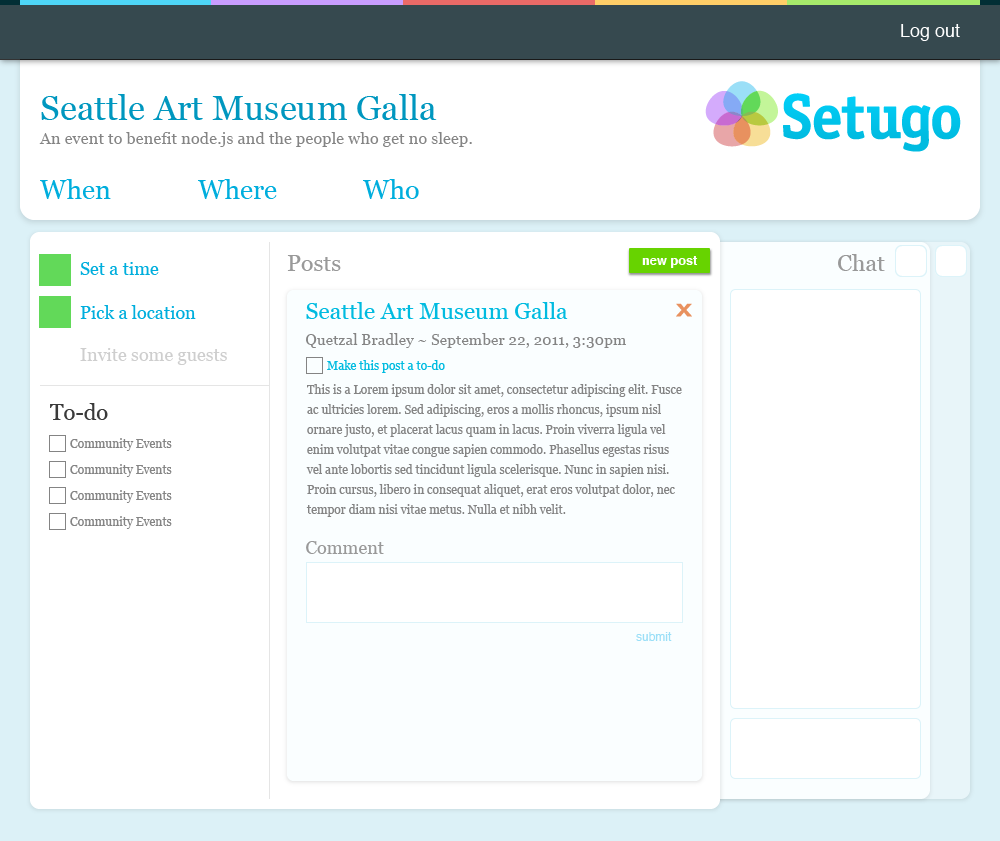
<style>
.page{position:relative;width:1000px;height:841px;background:#ffffff}
.page>*{position:absolute;margin:0}
.t1{font:18px "Helvetica";color:#ffffff}
.t2{font:35px "Georgia";color:#0097bf}
.t3{font:16.4px "Georgia";color:#848484}
.t4{font:27px "Georgia";color:#00aedd}
.t5{font:23px "Georgia";color:#999999}
.t6{font:12.8px "Helvetica-Bold";color:#ffffff}
.t7{font:18px "Georgia";color:#00aedd}
.t8{font:23.1px "Georgia";color:#00bbe0}
.t9{font:15.4px "Georgia";color:#848484}
.t10{font:18px "Georgia";color:#cecece}
.t11{font:12px "Georgia";color:#00bbe0}
.t12{font:12px/20px "Georgia";color:#848484}
.t13{font:22px "Georgia";color:#3a3a3a}
.t14{font:12px "Georgia";color:#848484}
.t15{font:18px "Georgia";color:#999999}
.t16{font:12px "Helvetica";color:#9bdff7}
</style>
<div class="page">
<p class="t1" style="left:901px;top:24px;width:59px;height:17px">Log out</p>
<p class="t2" style="left:41px;top:94px;width:396px;height:26px">Seattle Art Museum Galla</p>
<p class="t3" style="left:39px;top:132px;width:433px;height:15px">An event to benefit node.js and the people who get no sleep.</p>
<p class="t4" style="left:40px;top:179px;width:71px;height:20px">When</p>
<p class="t4" style="left:198px;top:179px;width:79px;height:20px">Where</p>
<p class="t4" style="left:363px;top:179px;width:56px;height:20px">Who</p>
<p class="t5" style="left:287px;top:255px;width:54px;height:16px">Posts</p>
<p class="t6" style="left:642px;top:256px;width:56px;height:12px">new post</p>
<p class="t5" style="left:838px;top:254px;width:47px;height:17px">Chat</p>
<p class="t7" style="left:80px;top:262px;width:79px;height:13px">Set a time</p>
<p class="t7" style="left:80px;top:305px;width:116px;height:14px">Pick a location</p>
<p class="t8" style="left:306px;top:302px;width:262px;height:17px">Seattle Art Museum Galla</p>
<p class="t9" style="left:306px;top:333px;width:320px;height:15px">Quetzal Bradley ~ September 22, 2011, 3:30pm</p>
<p class="t10" style="left:80px;top:348px;width:147px;height:17px">Invite some guests</p>
<p class="t11" style="left:327px;top:360px;width:118px;height:13px">Make this post a to-do</p>
<p class="t12" style="left:306px;top:384px;width:376px;height:133px">This is a Lorem ipsum dolor sit amet, consectetur adipiscing elit. Fusce ac ultricies lorem. Sed adipiscing, eros a mollis rhoncus, ipsum nisl ornare justo, et placerat lacus quam in lacus. Proin viverra ligula vel enim volutpat vitae congue sapien commodo. Phasellus egestas risus vel ante lobortis sed tincidunt ligula scelerisque. Nunc in sapien nisi. Proin cursus, libero in consequat aliquet, erat eros volutpat dolor, nec tempor diam nisi vitae metus. Nulla et nibh velit.</p>
<p class="t13" style="left:50px;top:403px;width:58px;height:17px">To-do</p>
<p class="t14" style="left:70px;top:438px;width:102px;height:13px">Community Events</p>
<p class="t14" style="left:70px;top:464px;width:102px;height:13px">Community Events</p>
<p class="t14" style="left:70px;top:490px;width:102px;height:13px">Community Events</p>
<p class="t14" style="left:70px;top:516px;width:102px;height:13px">Community Events</p>
<p class="t15" style="left:306px;top:541px;width:78px;height:13px">Comment</p>
<p class="t16" style="left:636px;top:632px;width:36px;height:9px">submit</p>
</div>
